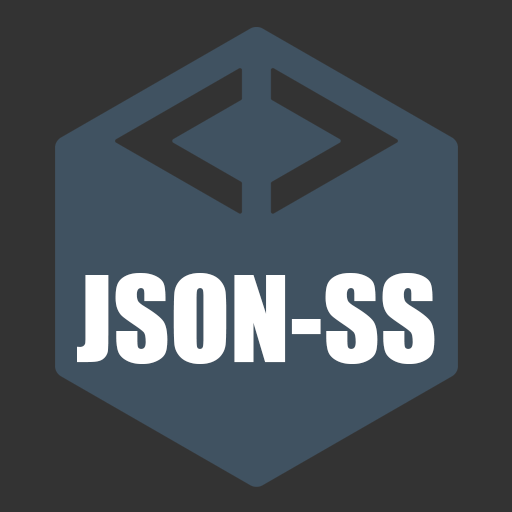
<style>
.page{position:relative;width:512px;height:512px;background:#333333}
.page>*{position:absolute;margin:0}
.t1{font:110.5px "Impact";color:#ffffff}
</style>
<div class="page">
<p class="t1" style="left:77px;top:273px;width:358px;height:91px">JSON-SS</p>
</div>
